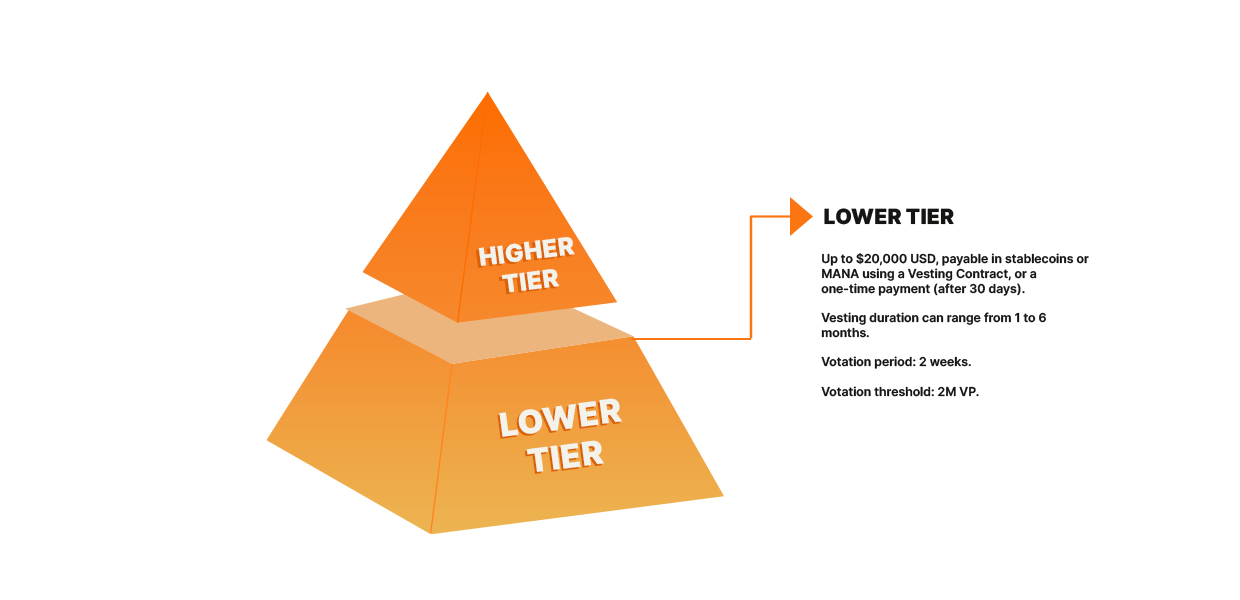
<style>
.page{position:relative;width:1240px;height:600px;background:#ffffff}
.page>*{position:absolute;margin:0}
.t1{font:20.9px "Inter-Black";color:#151514;text-transform:uppercase}
.t2{font:24.5px "Inter-Black";text-transform:uppercase}
.t3{font:24.5px "Inter-Black";color:#f3f2eb;text-transform:uppercase}
.t4{font:12.2px "Inter-SemiBold";color:#151514}
.t5{font:32.9px "Inter-Black";color:#f3f2eb;text-transform:uppercase}
</style>
<div class="page">
<p class="t1" style="left:824px;top:208px;width:130px;height:17px">lower tier</p>
<p class="t2" style="left:475px;top:239px;width:97px;height:56px;text-align:center;rotate:-7deg">Higher <br>Tier</p>
<p class="t3" style="left:478px;top:237px;width:97px;height:56px;text-align:center;rotate:-7deg">Higher <br>Tier</p>
<p class="t4" style="left:821px;top:252px;width:268px;height:145px">Up to $20,000 USD, payable in stablecoins or MANA using a Vesting Contract, or a one-time payment (after 30 days).<br><br>Vesting duration can range from 1 to 6 months.<br><br>Votation period: 2 weeks.<br><br>Votation threshold: 2M VP.</p>
<p class="t5" style="left:497px;top:400px;width:124px;height:74px;text-align:center;rotate:-7deg">Lower <br>Tier</p>
<p class="t5" style="left:499px;top:398px;width:124px;height:74px;text-align:center;rotate:-7deg">Lower <br>Tier</p>
</div>
